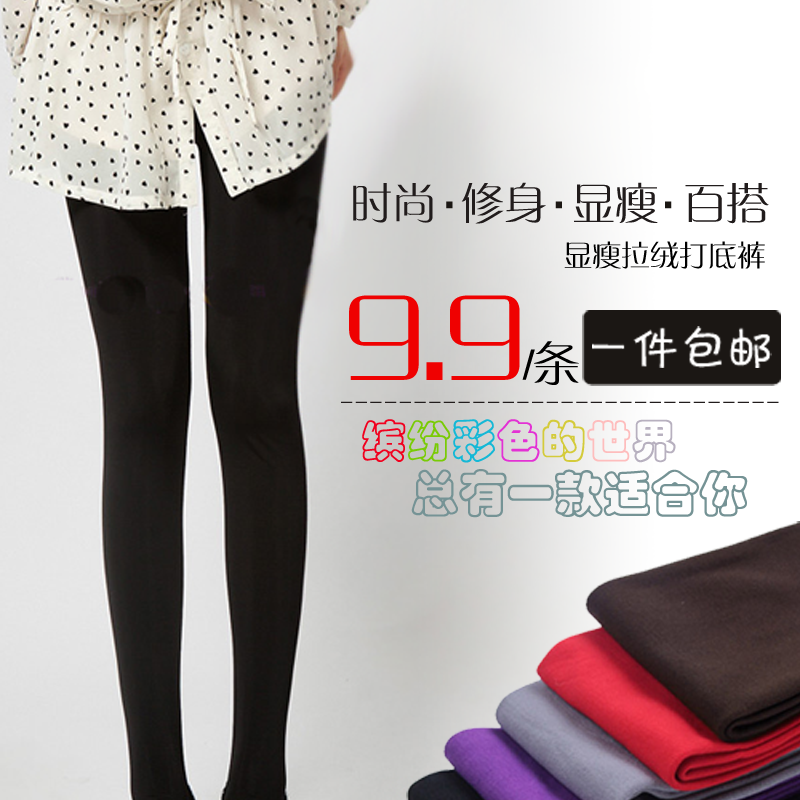
<style>
.page{position:relative;width:800px;height:800px}
.page>*{position:absolute;margin:0}
.t1{font:43.3px "FZZQJW--GB1-0";color:#211c1c}
.t2{font:50.3px "FZZQJW--GB1-0";color:#1b1713}
.t3{font:28.9px "FZZQJW--GB1-0";color:#000000}
.t4{font:130.4px "FZZQJW--GB1-0";color:#ef0101}
.t5{font:46.7px "FZZQJW--GB1-0";color:#000000}
.t6{font:47.5px "FZKATJW--GB1-0";color:#ffffff}
.t7{font:22.4px "FZZDXFW--GB1-0";color:#211c1c}
.t8{font:44.9px "FZCYJW--GB1-0";letter-spacing:-0.025em;color:#f1001e;font-weight:bold}
.t9{font:44.9px "FZCYJW--GB1-0";letter-spacing:-0.025em;color:#79cb05;font-weight:bold}
.t10{font:44.9px "FZCYJW--GB1-0";letter-spacing:-0.025em;color:#14b8d6;font-weight:bold}
.t11{font:44.9px "FZCYJW--GB1-0";letter-spacing:-0.025em;color:#e331d4;font-weight:bold}
.t12{font:44.9px "FZCYJW--GB1-0";letter-spacing:-0.025em;color:#d4cb3a;font-weight:bold}
.t13{font:44.9px "FZCYJW--GB1-0";letter-spacing:-0.025em;color:#febdbd;font-weight:bold}
.t14{font:44.9px "FZCYJW--GB1-0";letter-spacing:-0.025em;color:#b7b0bf;font-weight:bold}
.t15{font:49.2px "FZCYJW--GB1-0";letter-spacing:-0.05em;color:#759395;font-weight:bold}
</style>
<div class="page">
<p class="t1" style="left:353px;top:182px;width:416px;height:42px">时尚  修身  显瘦  百搭</p>
<p class="t2" style="left:446px;top:201px;width:226px;height:8px">.       .       .</p>
<p class="t3" style="left:564px;top:241px;width:201px;height:28px">显瘦拉绒打底裤</p>
<p class="t4" style="left:349px;top:295px;width:230px;height:90px">9.9<span class="t5">/条</span></p>
<p class="t6" style="left:592px;top:326px;width:180px;height:42px">一件包邮</p>
<p class="t7" style="left:341px;top:401px;width:438px;height:2px">------------------------------</p>
<p class="t8" style="left:362px;top:419px;width:314px;height:44px">缤<span class="t9">纷</span><span class="t10">彩</span><span class="t11">色</span><span class="t12">的</span><span class="t13">世</span><span class="t14">界</span></p>
<p class="t15" style="left:411px;top:469px;width:337px;height:49px">总有一款适合你</p>
</div>
